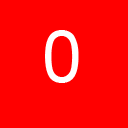
<style>
.page{position:relative;width:128px;height:128px;background:#ff0000}
.page>*{position:absolute;margin:0}
.t1{font:72px "ArialMT";color:#ffffff}
</style>
<div class="page">
<p class="t1" style="left:45px;top:30px;width:34px;height:53px">0</p>
</div>
